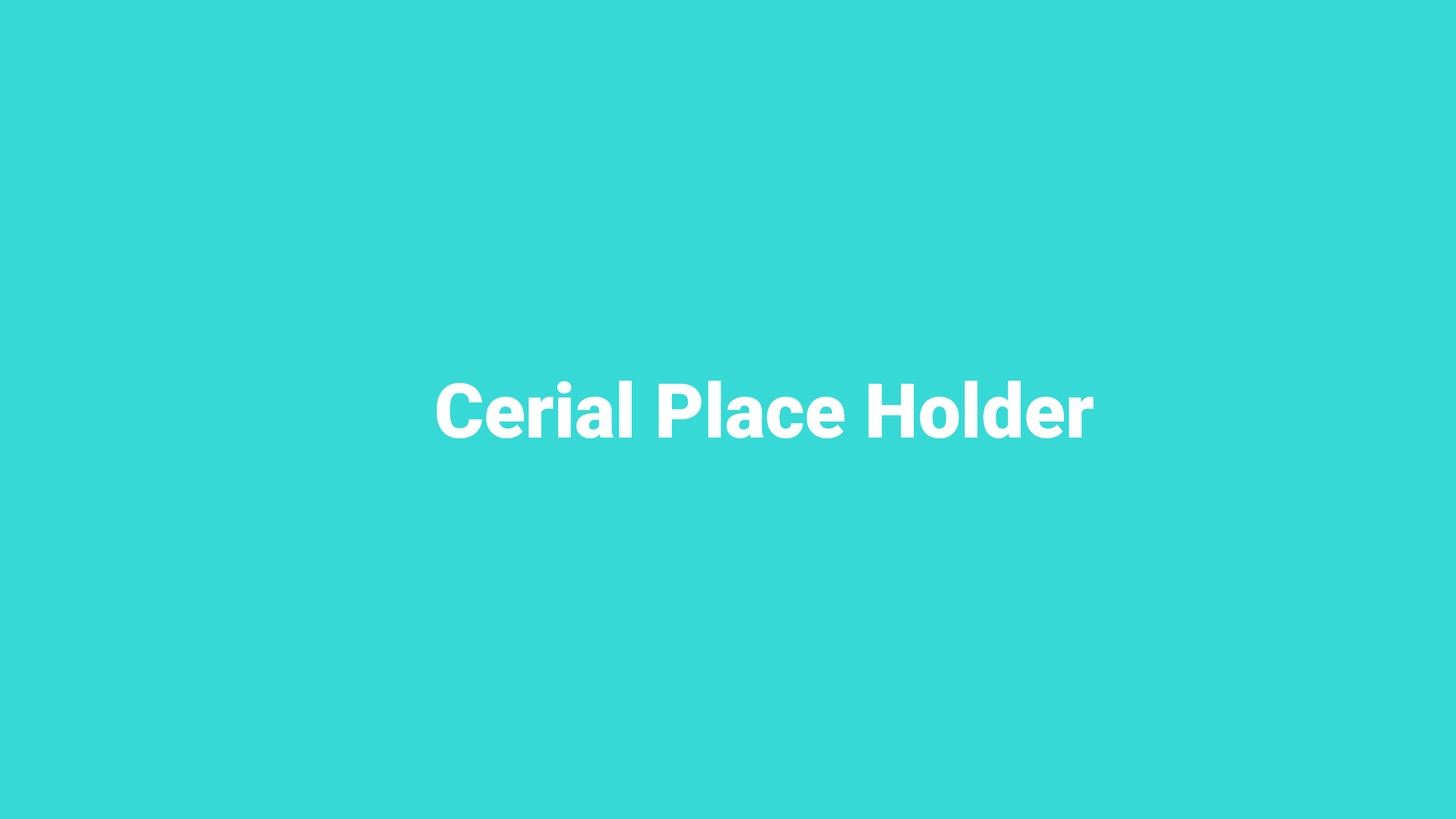
<style>
.page{position:relative;width:1456px;height:819px;background:#36d9d5}
.page>*{position:absolute;margin:0}
.t1{font:75.8px "Roboto-Black";color:#ffffff}
</style>
<div class="page">
<p class="t1" style="left:437px;top:381px;width:657px;height:57px">Cerial Place Holder</p>
</div>
